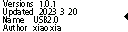
<style>
.page{position:relative;width:128px;height:32px;background:#ffffff}
.page>*{position:absolute;margin:0}
.t1{font:8px "AdobeHeitiStd-Regular";color:#000500}
</style>
<div class="page">
<p class="t1" style="left:3px;top:0px;width:30px;height:7px">Versions</p>
<p class="t1" style="left:40px;top:0px;width:15px;height:7px">1.0.1</p>
<p class="t1" style="left:3px;top:8px;width:30px;height:9px">Updated</p>
<p class="t1" style="left:3px;top:16px;width:21px;height:7px">Name</p>
<p class="t1" style="left:34px;top:16px;width:24px;height:7px">USB2.0</p>
<p class="t1" style="left:39px;top:8px;width:38px;height:7px">2023  3  20</p>
<p class="t1" style="left:3px;top:24px;width:24px;height:7px">Author</p>
<p class="t1" style="left:33px;top:24px;width:28px;height:7px">xiao xia</p>
</div>
